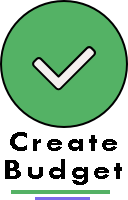
<style>
.page{position:relative;width:128px;height:200px;background:#54b265}
.page>*{position:absolute;margin:0}
.t1{font:29.8px/27.8px "TwCenMT-Bold";letter-spacing:0.1em;color:#000000;scale:1.16 1}
</style>
<div class="page">
<p class="t1" style="left:5px;top:132px;width:117px;height:53px;text-align:center">Create<br>Budget</p>
</div>
